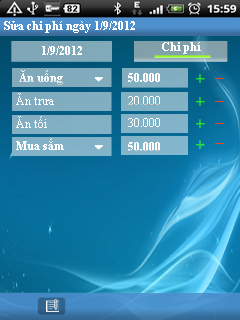
<style>
.page{position:relative;width:240px;height:320px}
.page>*{position:absolute;margin:0}
.t1{font:11.6px "TimesNewRomanPS-BoldMT";color:#ffffff}
.t2{font:11.6px "TimesNewRomanPSMT";color:#ffffff}
</style>
<div class="page">
<p class="t1" style="left:4px;top:21px;width:131px;height:12px">Sửa chi phí ngày 1/9/2012</p>
<p class="t1" style="left:42px;top:46px;width:40px;height:9px">1/9/2012</p>
<p class="t1" style="left:162px;top:42px;width:39px;height:12px">Chi phí</p>
<p class="t1" style="left:19px;top:70px;width:44px;height:15px">Ăn uống</p>
<p class="t1" style="left:128px;top:73px;width:32px;height:9px">50.000</p>
<p class="t2" style="left:16px;top:93px;width:38px;height:12px">Ăn trưa</p>
<p class="t2" style="left:128px;top:96px;width:32px;height:9px">20.000</p>
<p class="t2" style="left:16px;top:116px;width:31px;height:12px">Ăn tối</p>
<p class="t2" style="left:128px;top:118px;width:32px;height:9px">30.000</p>
<p class="t1" style="left:16px;top:138px;width:48px;height:12px">Mua sắm</p>
<p class="t1" style="left:128px;top:142px;width:32px;height:9px">50.000</p>
</div>
